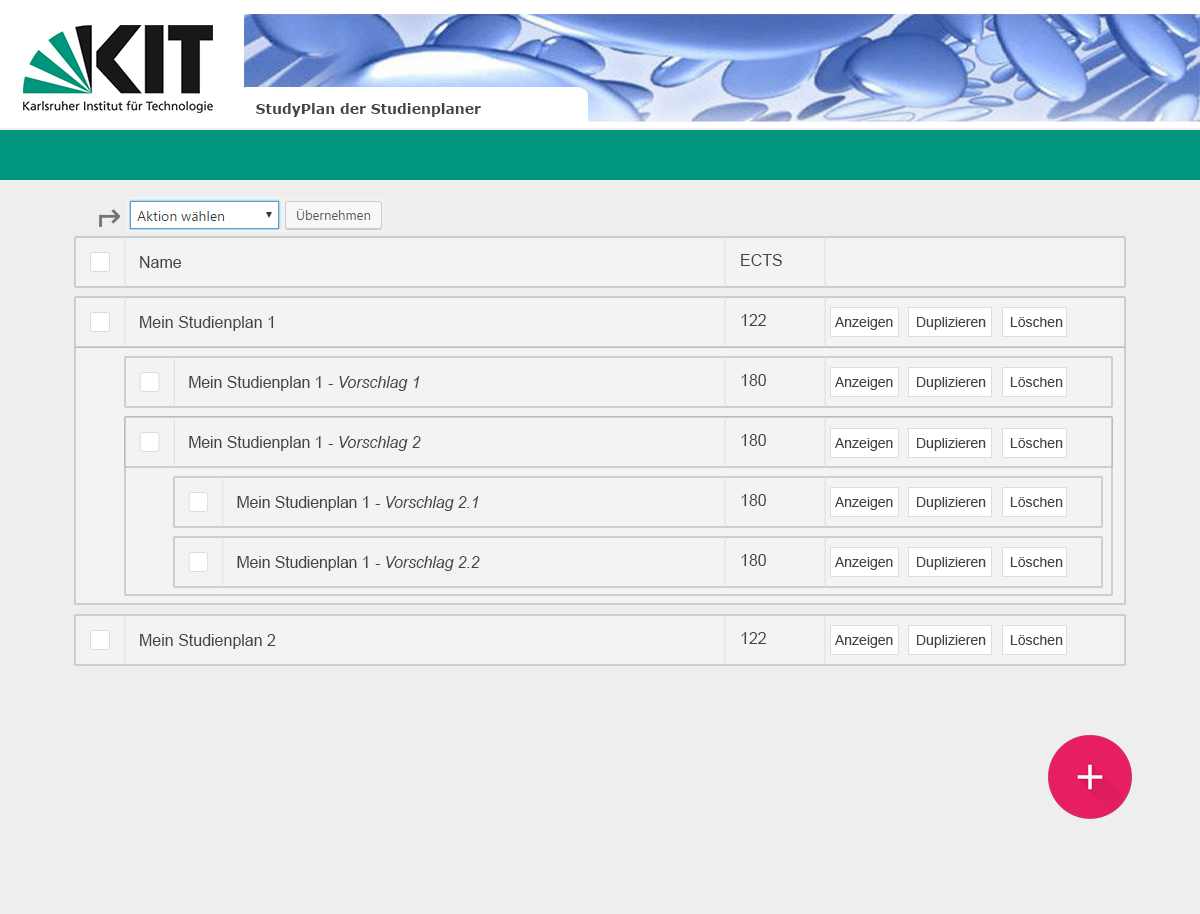
<style>
.page{position:relative;width:1200px;height:914px;background:#eeeeee}
.page>*{position:absolute;margin:0}
.t1{font:14px "Verdana-Bold";color:#444444}
.t2{font:16px "ArialMT";color:#444444}
.t3{font:14px "ArialMT";color:#444444}
.t4{font:16px "Arial-ItalicMT";color:#444444}
</style>
<div class="page">
<p class="t1" style="left:256px;top:103px;width:225px;height:14px">StudyPlan der Studienplaner</p>
<p class="t2" style="left:140px;top:256px;width:42px;height:12px">Name</p>
<p class="t2" style="left:741px;top:254px;width:41px;height:12px">ECTS</p>
<p class="t2" style="left:140px;top:316px;width:134px;height:15px">Mein Studienplan 1</p>
<p class="t2" style="left:741px;top:314px;width:25px;height:12px">122</p>
<p class="t3" style="left:835px;top:317px;width:58px;height:13px">Anzeigen</p>
<p class="t3" style="left:917px;top:317px;width:69px;height:13px">Duplizieren</p>
<p class="t3" style="left:1010px;top:317px;width:53px;height:10px">Löschen</p>
<p class="t2" style="left:189px;top:376px;width:231px;height:15px">Mein Studienplan 1<span class="t4"> - Vorschlag 1</span></p>
<p class="t2" style="left:741px;top:374px;width:25px;height:12px">180</p>
<p class="t3" style="left:835px;top:377px;width:58px;height:13px">Anzeigen</p>
<p class="t3" style="left:917px;top:377px;width:69px;height:13px">Duplizieren</p>
<p class="t3" style="left:1010px;top:377px;width:53px;height:10px">Löschen</p>
<p class="t2" style="left:189px;top:436px;width:232px;height:15px">Mein Studienplan 1<span class="t4"> - Vorschlag 2</span></p>
<p class="t2" style="left:741px;top:434px;width:25px;height:12px">180</p>
<p class="t3" style="left:835px;top:438px;width:58px;height:13px">Anzeigen</p>
<p class="t3" style="left:917px;top:438px;width:69px;height:13px">Duplizieren</p>
<p class="t3" style="left:1010px;top:438px;width:53px;height:10px">Löschen</p>
<p class="t2" style="left:237px;top:496px;width:242px;height:15px">Mein Studienplan 1<span class="t4"> - Vorschlag 2.1</span></p>
<p class="t2" style="left:741px;top:494px;width:25px;height:12px">180</p>
<p class="t3" style="left:835px;top:497px;width:58px;height:13px">Anzeigen</p>
<p class="t3" style="left:917px;top:497px;width:69px;height:13px">Duplizieren</p>
<p class="t3" style="left:1010px;top:497px;width:53px;height:10px">Löschen</p>
<p class="t2" style="left:237px;top:556px;width:243px;height:15px">Mein Studienplan 1<span class="t4"> - Vorschlag 2.2</span></p>
<p class="t2" style="left:741px;top:554px;width:25px;height:12px">180</p>
<p class="t3" style="left:835px;top:557px;width:58px;height:13px">Anzeigen</p>
<p class="t3" style="left:917px;top:557px;width:69px;height:13px">Duplizieren</p>
<p class="t3" style="left:1010px;top:557px;width:53px;height:10px">Löschen</p>
<p class="t2" style="left:140px;top:634px;width:136px;height:15px">Mein Studienplan 2</p>
<p class="t2" style="left:741px;top:632px;width:25px;height:12px">122</p>
<p class="t3" style="left:835px;top:635px;width:58px;height:13px">Anzeigen</p>
<p class="t3" style="left:917px;top:635px;width:69px;height:13px">Duplizieren</p>
<p class="t3" style="left:1010px;top:635px;width:53px;height:10px">Löschen</p>
</div>
